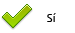
<style>
.page{position:relative;width:75px;height:33px;background:#ffffff}
.page>*{position:absolute;margin:0}
.t1{font:11px "SegoeUI";color:#000000}
</style>
<div class="page">
<p class="t1" style="left:47px;top:13px;width:9px;height:9px">Sí</p>
</div>
